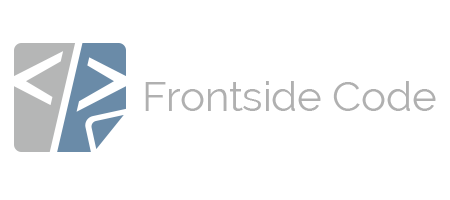
<style>
.page{position:relative;width:450px;height:200px;background:#ffffff}
.page>*{position:absolute;margin:0}
.t1{font:41.6px "Raleway";color:#b0b0b0}
</style>
<div class="page">
<p class="t1" style="left:145px;top:81px;width:291px;height:30px">Frontside Code</p>
</div>
